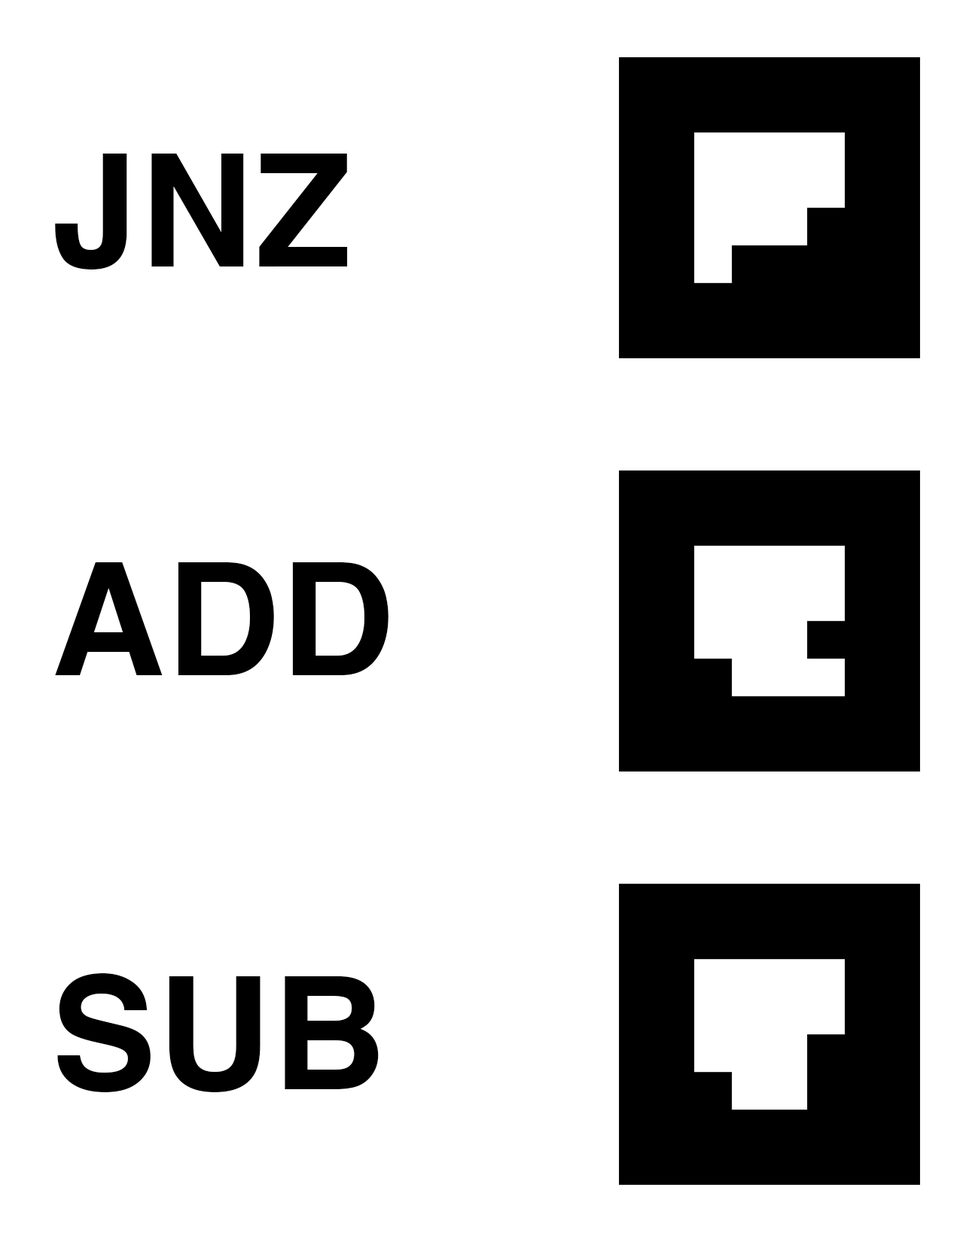
<style>
.page{position:relative;width:960px;height:1242px;background:#ffffff}
.page>*{position:absolute;margin:0}
.t1{font:157px "Helvetica-Bold";letter-spacing:0.01em;color:#000000}
</style>
<div class="page">
<p class="t1" style="left:55px;top:154px;width:293px;height:116px">JNZ</p>
<p class="t1" style="left:55px;top:562px;width:333px;height:113px">ADD</p>
<p class="t1" style="left:57px;top:973px;width:322px;height:119px">SUB</p>
</div>
